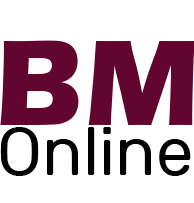
<style>
.page{position:relative;width:194px;height:203px;background:#ffffff}
.page>*{position:absolute;margin:0}
.t1{font:126.4px "ErasITC-Bold";color:#62052f}
.t2{font:67.3px "Rubik-Regular";color:#020202}
</style>
<div class="page">
<p class="t1" style="left:0px;top:40px;width:195px;height:85px">BM</p>
<p class="t2" style="left:0px;top:127px;width:191px;height:49px">Online</p>
</div>
